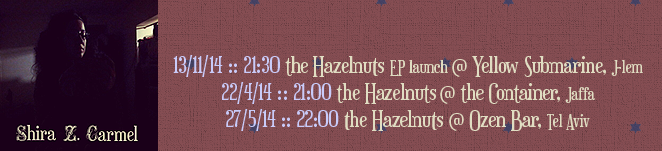
<style>
.page{position:relative;width:662px;height:151px;background:#864e53}
.page>*{position:absolute;margin:0}
.t1{font:22.7px "Euphorigenic-Regular";letter-spacing:-0.025em;color:#e0ddc2}
.t2{font:22.7px "Euphorigenic-Regular";letter-spacing:-0.01em;color:#c9cbf9}
.t3{font:22.7px "Euphorigenic-Regular";letter-spacing:-0.025em;color:#c9cbf9}
.t4{font:17px "Euphorigenic-Regular";letter-spacing:-0.01em;color:#e0ddc2}
.t5{font:22.7px "Euphorigenic-Regular";letter-spacing:-0.01em;color:#e0ddc2}
</style>
<div class="page">
<p class="t1" style="left:173px;top:55px;width:470px;height:76px;text-align:center"><span class="t2">13/11/14 :: </span><span class="t3">21:30 </span>the Hazelnuts <span class="t4">EP launch </span><span class="t5">@ </span>Yellow Submarine<span class="t5">, </span><span class="t4">J-lem<br></span><span class="t2">22/4/14 :: </span><span class="t3">21:00 </span>the Hazelnuts <span class="t5">@ </span>the Container, <span class="t4">Jaffa<br></span><span class="t2">27/5/14 :: </span><span class="t3">22:00 </span>the Hazelnuts<span class="t5"> @ </span>Ozen Bar<span class="t5">, </span><span class="t4">Tel Aviv</span></p>
</div>
